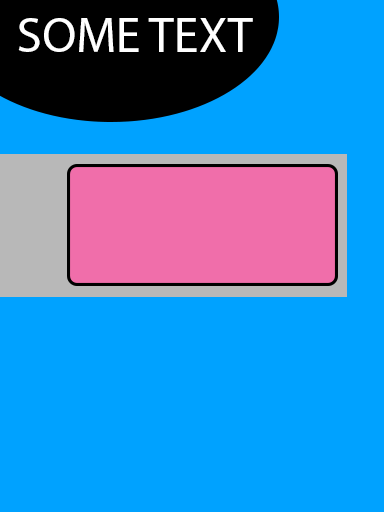
<style>
.page{position:relative;width:384px;height:512px;background:#00a2ff}
.page>*{position:absolute;margin:0}
.t1{font:12px "MyriadPro-Regular";color:#ffffff}
</style>
<div class="page">
<p class="t1" style="left:18px;top:18px;width:235px;height:34px">SOME TEXT</p>
</div>
